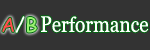
<style>
.page{position:relative;width:150px;height:50px;background:#333333}
.page>*{position:absolute;margin:0}
.t1{font:19.7px "ComicSansMS";letter-spacing:0.5em;color:#ff4d4d}
.t2{font:19.7px "ComicSansMS";letter-spacing:0.5em;color:#99f371}
.t3{font:19.7px "ComicSansMS";color:#ffffff}
.t4{font:21.6px "Georgia";color:#ffffff;scale:0.88 1}
.t5{font:22.3px "Georgia";color:#ffffff;scale:0.85 1}
.t6{font:20.2px "Georgia";color:#ffffff;scale:0.94 1}
</style>
<div class="page">
<p class="t1" style="left:2px;top:17px;width:35px;height:16px">A<span class="t2">B</span></p>
<p class="t3" style="left:15px;top:16px;width:10px;height:17px">/</p>
<p class="t4" style="left:41px;top:16px;width:108px;height:17px"><span class="t5">P</span>er<span class="t6">f</span>ormance</p>
</div>
